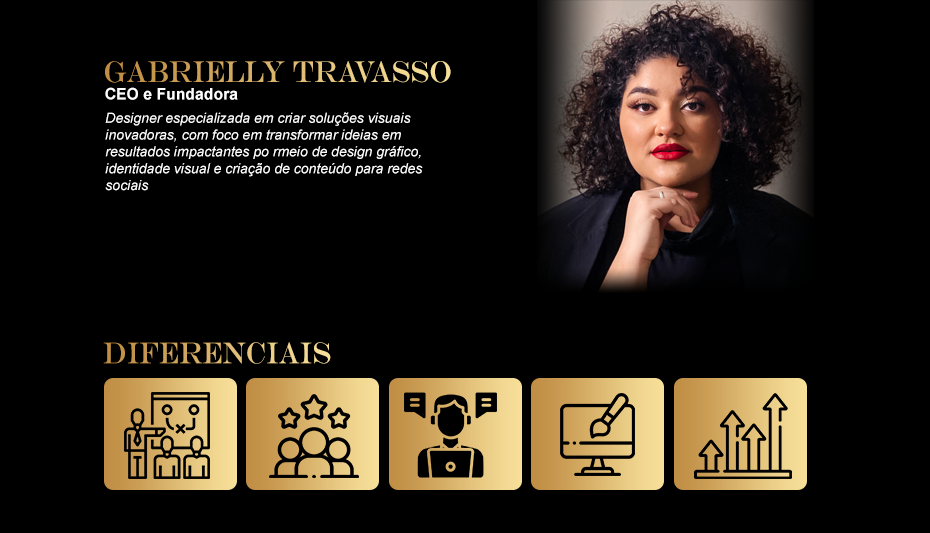
<style>
.page{position:relative;width:930px;height:533px;background:#000000}
.page>*{position:absolute;margin:0}
.t1{font:30.1px "EngraversMT";scale:0.79 1}
.t2{font:16.1px "Arial-BoldMT";color:#ffffff}
.t3{font:14px "Arial-ItalicMT";color:#ffffff}
</style>
<div class="page">
<p class="t1" style="left:105px;top:61px;width:346px;height:22px">Gabrielly Travasso</p>
<p class="t2" style="left:105px;top:87px;width:133px;height:13px">CEO e Fundadora</p>
<p class="t3" style="left:105px;top:112px;width:318px;height:79px">Designer especializada em criar soluções visuais inovadoras, com foco em transformar ideias em resultados impactantes po rmeio de design gráfico, identidade visual e criação de conteúdo para redes sociais</p>
<p class="t1" style="left:103px;top:342px;width:228px;height:22px">diferenciais</p>
</div>
